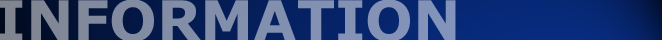
<style>
.page{position:relative;width:662px;height:40px}
.page>*{position:absolute;margin:0}
.t1{font:56px "Verdana-Bold";letter-spacing:-0.005em;color:#828eab}
</style>
<div class="page">
<p class="t1" style="left:0px;top:0px;width:456px;height:42px">INFORMATION</p>
</div>
